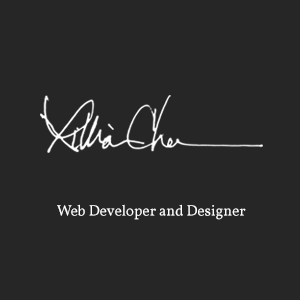
<style>
.page{position:relative;width:300px;height:300px;background:#262626}
.page>*{position:absolute;margin:0}
.t1{font:15px "Vollkorn-Regular";color:#ffffff}
</style>
<div class="page">
<p class="t1" style="left:57px;top:204px;width:189px;height:16px">Web Developer and Designer</p>
</div>
